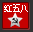
<style>
.page{position:relative;width:33px;height:32px;background:#c50000}
.page>*{position:absolute;margin:0}
.t1{font:10.4px "SimSun";letter-spacing:-0.25em;color:#ffffff}
</style>
<div class="page">
<p class="t1" style="left:4px;top:4px;width:24px;height:9px">红五八</p>
</div>
